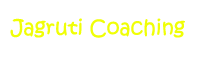
<style>
.page{position:relative;width:200px;height:60px;background:#ffffff}
.page>*{position:absolute;margin:0}
.t1{font:20.6px "KristenITC-Regular";color:#f0ff06}
</style>
<div class="page">
<p class="t1" style="left:10px;top:18px;width:175px;height:20px">Jagruti Coaching</p>
</div>
